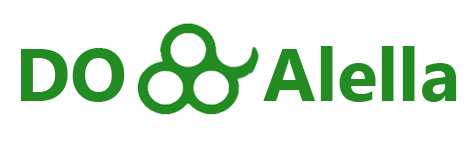
<style>
.page{position:relative;width:473px;height:145px;background:#ffffff}
.page>*{position:absolute;margin:0}
.t1{font:74.5px "Gadugi-Bold";color:#228b22}
</style>
<div class="page">
<p class="t1" style="left:21px;top:48px;width:104px;height:54px">DO</p>
<p class="t1" style="left:263px;top:46px;width:194px;height:56px">Alella</p>
</div>
